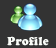
<style>
.page{position:relative;width:56px;height:48px;background:#333333}
.page>*{position:absolute;margin:0}
.t1{font:12px "CooperBlack";color:#f9fcf8}
</style>
<div class="page">
<p class="t1" style="left:7px;top:36px;width:42px;height:10px">Profile</p>
</div>
